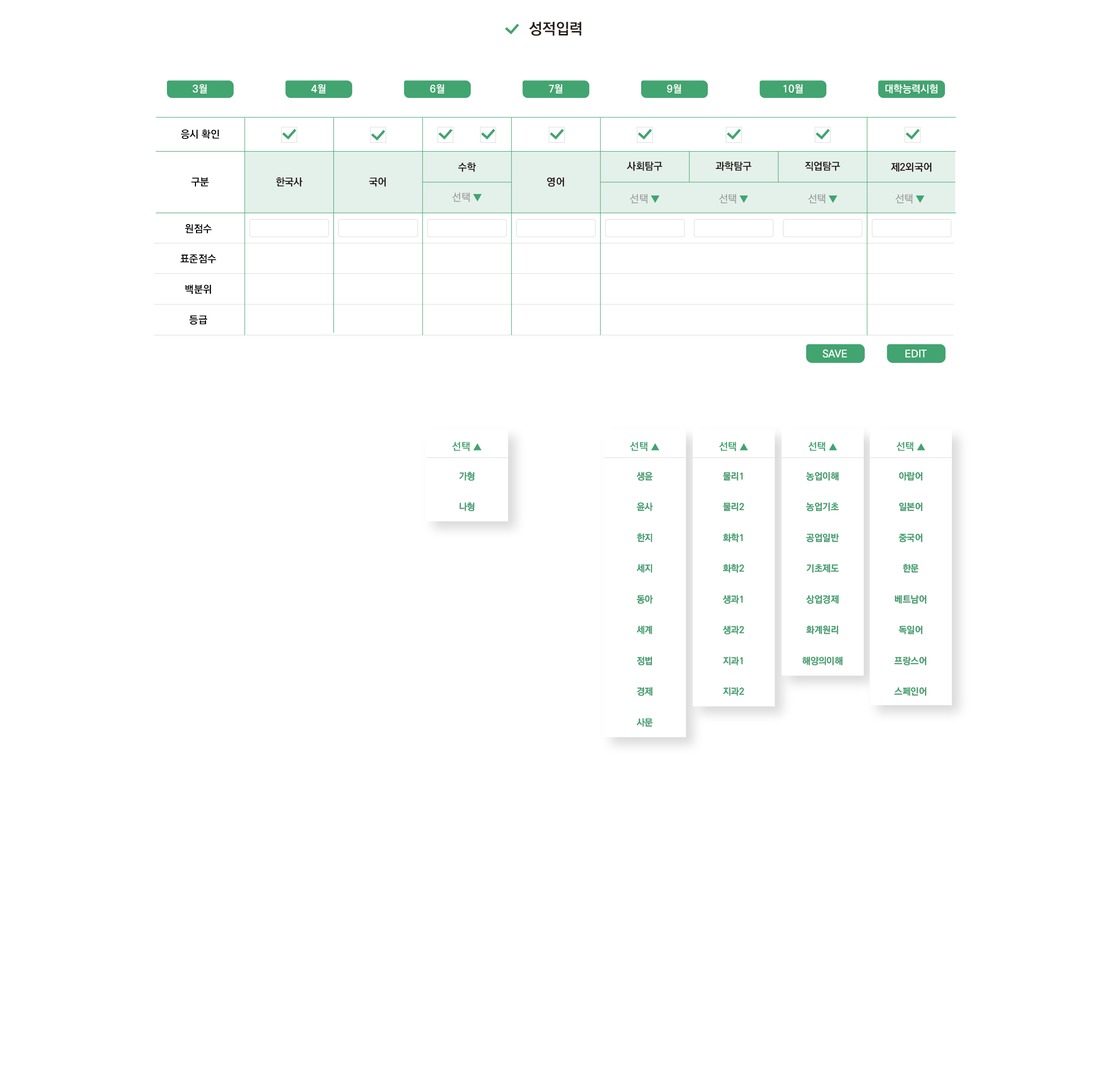
<style>
.page{position:relative;width:1110px;height:1075px;background:#ffffff}
.page>*{position:absolute;margin:0}
.t1{font:15.4px "KoPubWorldDotumPB";color:#281e1c}
.t2{font:10.3px "KoPubWorldDotumPB";color:#ffffff}
.t3{font:10.3px "KoPubWorldDotumPB";color:#000000}
.t4{font:10.3px "KoPubWorldDotumPB";color:#221814}
.t5{font:10.3px "KoPubWorldDotumPB";color:#231815}
.t6{font:10.3px "KoPubWorldDotumPL"}
.t7{font:9.2px "KoPubWorldDotumPL"}
.t8{font:10.3px "KoPubWorldDotumPL";color:#9d9d9e}
.t9{font:9.2px "KoPubWorldDotumPL";color:#42a470}
.t10{font:10.3px "KoPubWorldDotumPB";color:#42a470}
.t11{font:9.2px "KoPubWorldDotumPB";color:#42a470}
.t12{font:9.2px/30.8px "KoPubWorldDotumPB";color:#41a470}
.t13{font:9.2px/30.8px "KoPubWorldDotumPB";color:#42a470}
</style>
<div class="page">
<p class="t1" style="left:529px;top:22px;width:52px;height:14px">성적입력</p>
<p class="t2" style="left:192px;top:84px;width:15px;height:10px">3월</p>
<p class="t2" style="left:192px;top:84px;width:15px;height:10px">3월</p>
<p class="t2" style="left:311px;top:84px;width:14px;height:10px">4월</p>
<p class="t2" style="left:311px;top:84px;width:14px;height:10px">4월</p>
<p class="t2" style="left:430px;top:84px;width:14px;height:10px">6월</p>
<p class="t2" style="left:430px;top:84px;width:14px;height:10px">6월</p>
<p class="t2" style="left:548px;top:84px;width:14px;height:10px">7월</p>
<p class="t2" style="left:548px;top:84px;width:14px;height:10px">7월</p>
<p class="t2" style="left:667px;top:84px;width:14px;height:10px">9월</p>
<p class="t2" style="left:667px;top:84px;width:14px;height:10px">9월</p>
<p class="t2" style="left:783px;top:84px;width:19px;height:10px">10월</p>
<p class="t2" style="left:783px;top:84px;width:19px;height:10px">10월</p>
<p class="t2" style="left:885px;top:84px;width:52px;height:10px">대학능력시험</p>
<p class="t2" style="left:885px;top:84px;width:52px;height:10px">대학능력시험</p>
<p class="t3" style="left:181px;top:129px;width:38px;height:10px">응시 확인</p>
<p class="t4" style="left:626px;top:161px;width:36px;height:10px">사회탐구</p>
<p class="t5" style="left:626px;top:161px;width:36px;height:10px">사회탐구</p>
<p class="t4" style="left:715px;top:161px;width:36px;height:10px">과학탐구</p>
<p class="t5" style="left:715px;top:161px;width:36px;height:10px">과학탐구</p>
<p class="t4" style="left:804px;top:161px;width:36px;height:10px">직업탐구</p>
<p class="t5" style="left:804px;top:161px;width:36px;height:10px">직업탐구</p>
<p class="t4" style="left:458px;top:162px;width:18px;height:10px">수학</p>
<p class="t5" style="left:458px;top:162px;width:18px;height:10px">수학</p>
<p class="t4" style="left:891px;top:162px;width:40px;height:10px">제2외국어</p>
<p class="t5" style="left:891px;top:162px;width:40px;height:10px">제2외국어</p>
<p class="t3" style="left:191px;top:177px;width:18px;height:10px">구분</p>
<p class="t4" style="left:276px;top:177px;width:26px;height:10px">한국사</p>
<p class="t5" style="left:276px;top:177px;width:26px;height:10px">한국사</p>
<p class="t4" style="left:369px;top:177px;width:17px;height:10px">국어</p>
<p class="t5" style="left:369px;top:177px;width:17px;height:10px">국어</p>
<p class="t4" style="left:547px;top:177px;width:17px;height:10px">영어</p>
<p class="t5" style="left:547px;top:177px;width:17px;height:10px">영어</p>
<p class="t6" style="left:452px;top:192px;width:29px;height:10px">선택 <span class="t7">▼</span></p>
<p class="t8" style="left:452px;top:192px;width:29px;height:10px">선택 <span class="t9">▼</span></p>
<p class="t6" style="left:630px;top:194px;width:29px;height:9px">선택 <span class="t7">▼</span></p>
<p class="t8" style="left:630px;top:194px;width:29px;height:9px">선택 <span class="t9">▼</span></p>
<p class="t6" style="left:719px;top:194px;width:29px;height:9px">선택 <span class="t7">▼</span></p>
<p class="t8" style="left:719px;top:194px;width:29px;height:9px">선택 <span class="t9">▼</span></p>
<p class="t6" style="left:808px;top:194px;width:29px;height:9px">선택 <span class="t7">▼</span></p>
<p class="t8" style="left:808px;top:194px;width:29px;height:9px">선택 <span class="t9">▼</span></p>
<p class="t6" style="left:895px;top:194px;width:29px;height:9px">선택 <span class="t7">▼</span></p>
<p class="t8" style="left:895px;top:194px;width:29px;height:9px">선택 <span class="t9">▼</span></p>
<p class="t3" style="left:185px;top:224px;width:27px;height:9px">원점수</p>
<p class="t3" style="left:180px;top:254px;width:36px;height:9px">표준점수</p>
<p class="t3" style="left:185px;top:285px;width:26px;height:9px">백분위</p>
<p class="t3" style="left:189px;top:315px;width:18px;height:10px">등급</p>
<p class="t2" style="left:822px;top:349px;width:25px;height:8px">SAVE</p>
<p class="t2" style="left:822px;top:349px;width:25px;height:8px">SAVE</p>
<p class="t2" style="left:822px;top:349px;width:25px;height:8px">SAVE</p>
<p class="t2" style="left:822px;top:349px;width:25px;height:8px">SAVE</p>
<p class="t2" style="left:905px;top:350px;width:21px;height:7px">EDIT</p>
<p class="t2" style="left:905px;top:350px;width:21px;height:7px">EDIT</p>
<p class="t2" style="left:905px;top:350px;width:21px;height:7px">EDIT</p>
<p class="t2" style="left:905px;top:350px;width:21px;height:7px">EDIT</p>
<p class="t10" style="left:452px;top:442px;width:29px;height:9px">선택 <span class="t11">▲</span></p>
<p class="t10" style="left:630px;top:442px;width:29px;height:9px">선택 <span class="t11">▲</span></p>
<p class="t10" style="left:719px;top:442px;width:29px;height:9px">선택 <span class="t11">▲</span></p>
<p class="t10" style="left:808px;top:442px;width:29px;height:9px">선택 <span class="t11">▲</span></p>
<p class="t10" style="left:896px;top:442px;width:29px;height:9px">선택 <span class="t11">▲</span></p>
<p class="t12" style="left:459px;top:472px;width:16px;height:39px;text-align:center">가형<br>나형</p>
<p class="t13" style="left:459px;top:472px;width:16px;height:39px;text-align:center">가형<br>나형</p>
<p class="t12" style="left:636px;top:472px;width:17px;height:255px;text-align:center">생윤<br>윤사<br>한지<br>세지<br>동아<br>세계<br>정법<br>경제<br>사문</p>
<p class="t13" style="left:636px;top:472px;width:17px;height:255px;text-align:center">생윤<br>윤사<br>한지<br>세지<br>동아<br>세계<br>정법<br>경제<br>사문</p>
<p class="t12" style="left:723px;top:472px;width:21px;height:224px;text-align:center">물리1<br>물리2<br>화학1<br>화학2<br>생과1<br>생과2<br>지과1<br>지과2</p>
<p class="t13" style="left:723px;top:472px;width:21px;height:224px;text-align:center">물리1<br>물리2<br>화학1<br>화학2<br>생과1<br>생과2<br>지과1<br>지과2</p>
<p class="t12" style="left:802px;top:472px;width:40px;height:193px;text-align:center">농업이해<br>농업기초<br>공업일반<br>기초제도<br>상업경제<br>화계원리<br>해양의이해</p>
<p class="t13" style="left:802px;top:472px;width:40px;height:193px;text-align:center">농업이해<br>농업기초<br>공업일반<br>기초제도<br>상업경제<br>화계원리<br>해양의이해</p>
<p class="t12" style="left:894px;top:472px;width:32px;height:224px;text-align:center">아랍어<br>일본어<br>중국어<br>한문<br>베트남어<br>독일어<br>프랑스어<br>스페인어</p>
<p class="t13" style="left:894px;top:472px;width:32px;height:224px;text-align:center">아랍어<br>일본어<br>중국어<br>한문<br>베트남어<br>독일어<br>프랑스어<br>스페인어</p>
</div>
